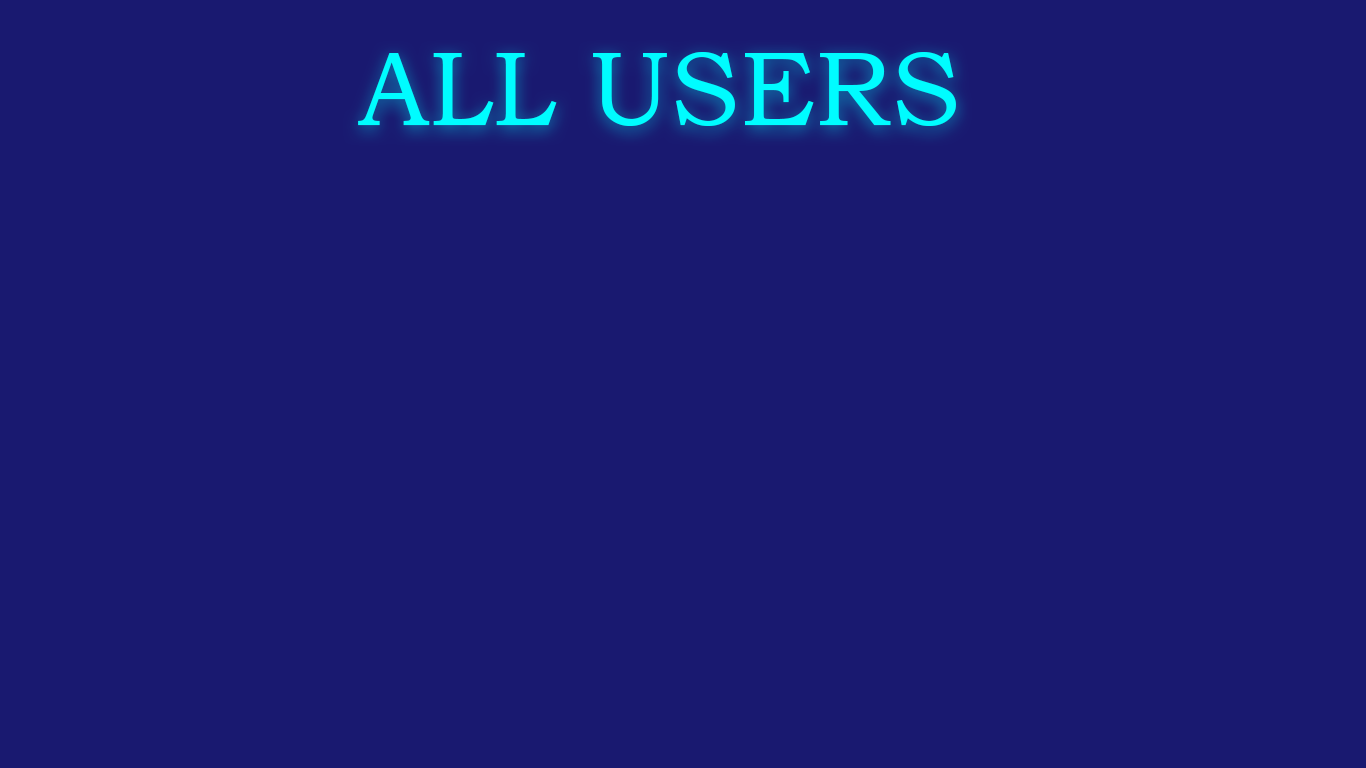
<style>
.page{position:relative;width:1366px;height:768px;background:#191970}
.page>*{position:absolute;margin:0}
.t1{font:104.8px "BookmanOldStyle";color:#00fcff;text-transform:uppercase}
</style>
<div class="page">
<p class="t1" style="left:358px;top:52px;width:598px;height:74px">All Users</p>
</div>
